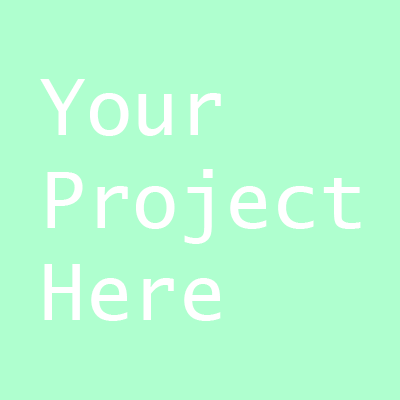
<style>
.page{position:relative;width:400px;height:400px;background:#afffcf}
.page>*{position:absolute;margin:0}
.t1{font:77.3px "LucidaSans-Typewriter";color:#ffffff}
</style>
<div class="page">
<p class="t1" style="left:40px;top:79px;width:321px;height:242px">Your<br>Project<br>Here</p>
</div>
